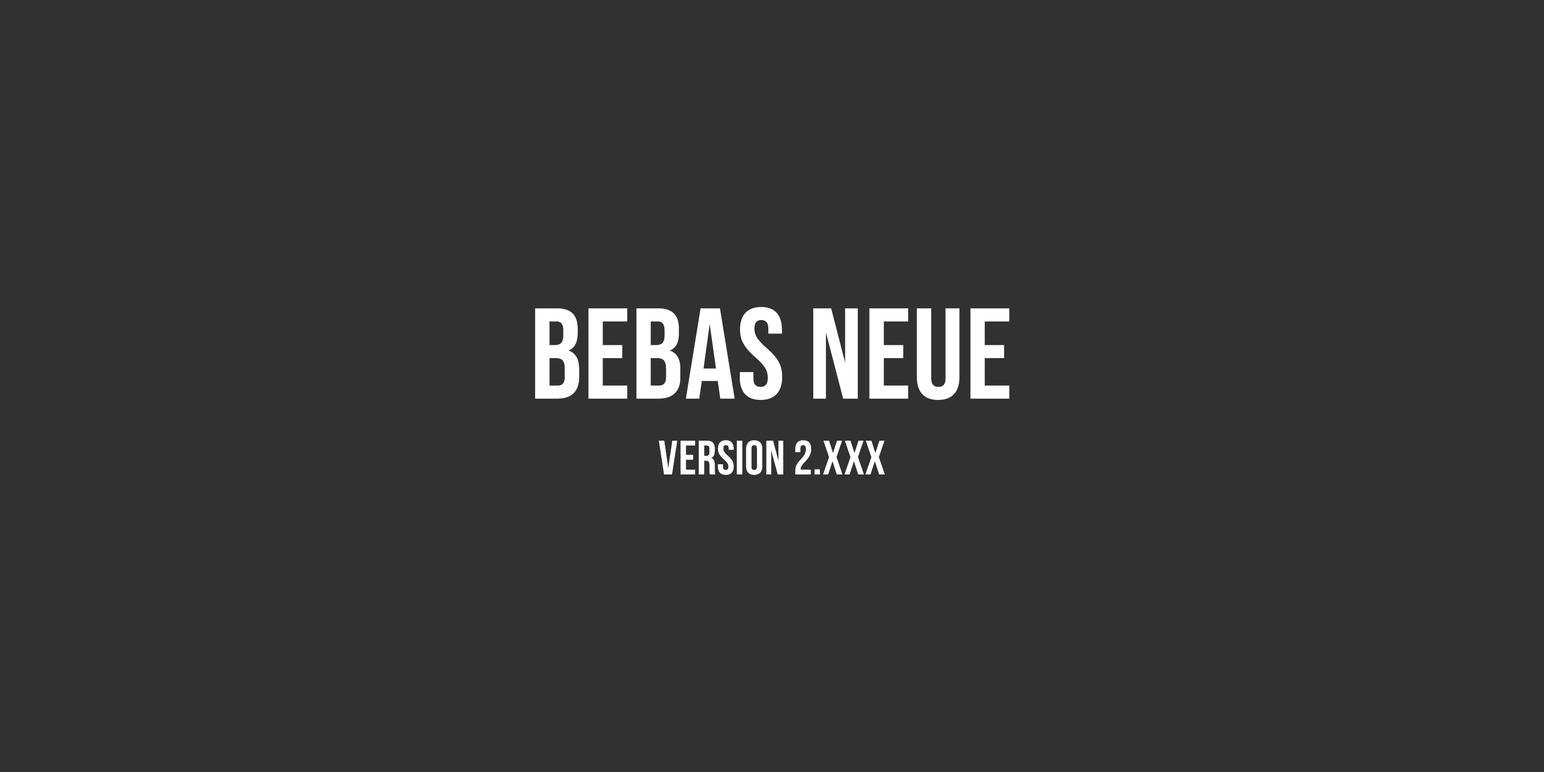
<style>
.page{position:relative;width:1544px;height:772px;background:#313131}
.page>*{position:absolute;margin:0}
.t1{font:128.7px "BebasNeue-Regular";letter-spacing:0.01em;color:#ffffff}
.t2{font:48.3px "BebasNeue";letter-spacing:0.01em;color:#ffffff}
</style>
<div class="page">
<p class="t1" style="left:535px;top:307px;width:475px;height:93px">Bebas neue</p>
<p class="t2" style="left:659px;top:440px;width:226px;height:35px">version 2.xxx</p>
</div>
